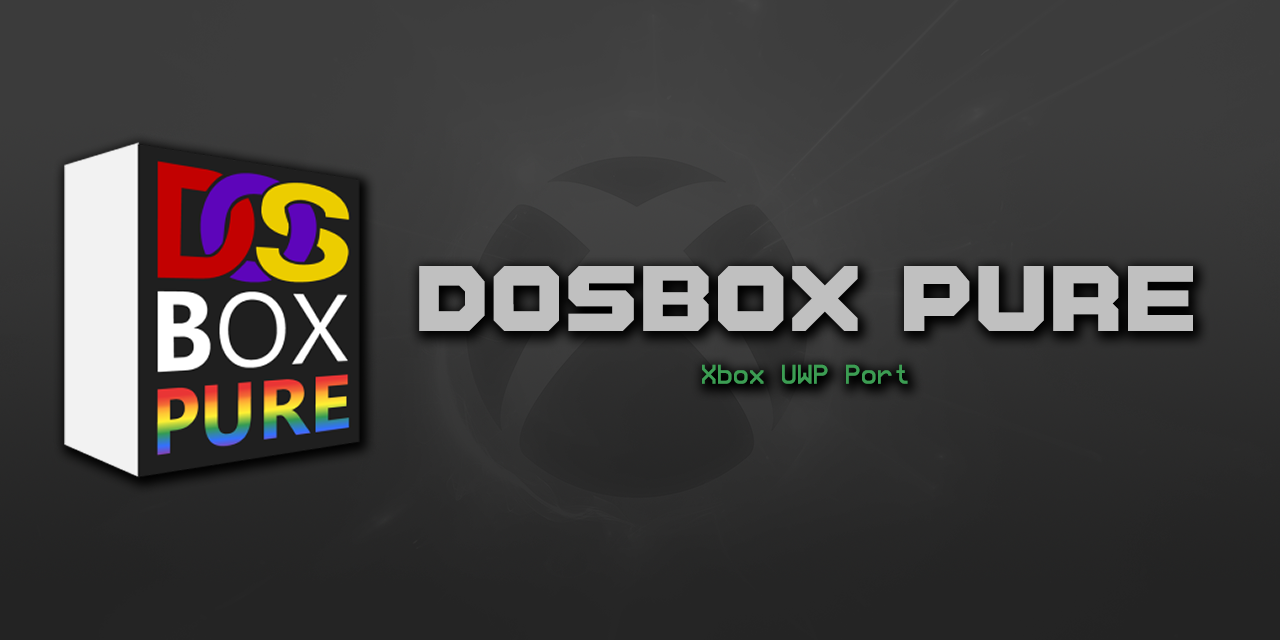
<style>
.page{position:relative;width:1280px;height:640px}
.page>*{position:absolute;margin:0}
.t1{font:24px "ProFontIIxNF";color:#3c9d53}
.t2{font:100px "NintendoLabo";color:#c0c0c0}
</style>
<div class="page">
<p class="t1" style="left:419px;top:266px;width:774px;height:118px;text-align:center"><span class="t2">DOSBox Pure<br><br></span>Xbox UWP Port</p>
</div>
